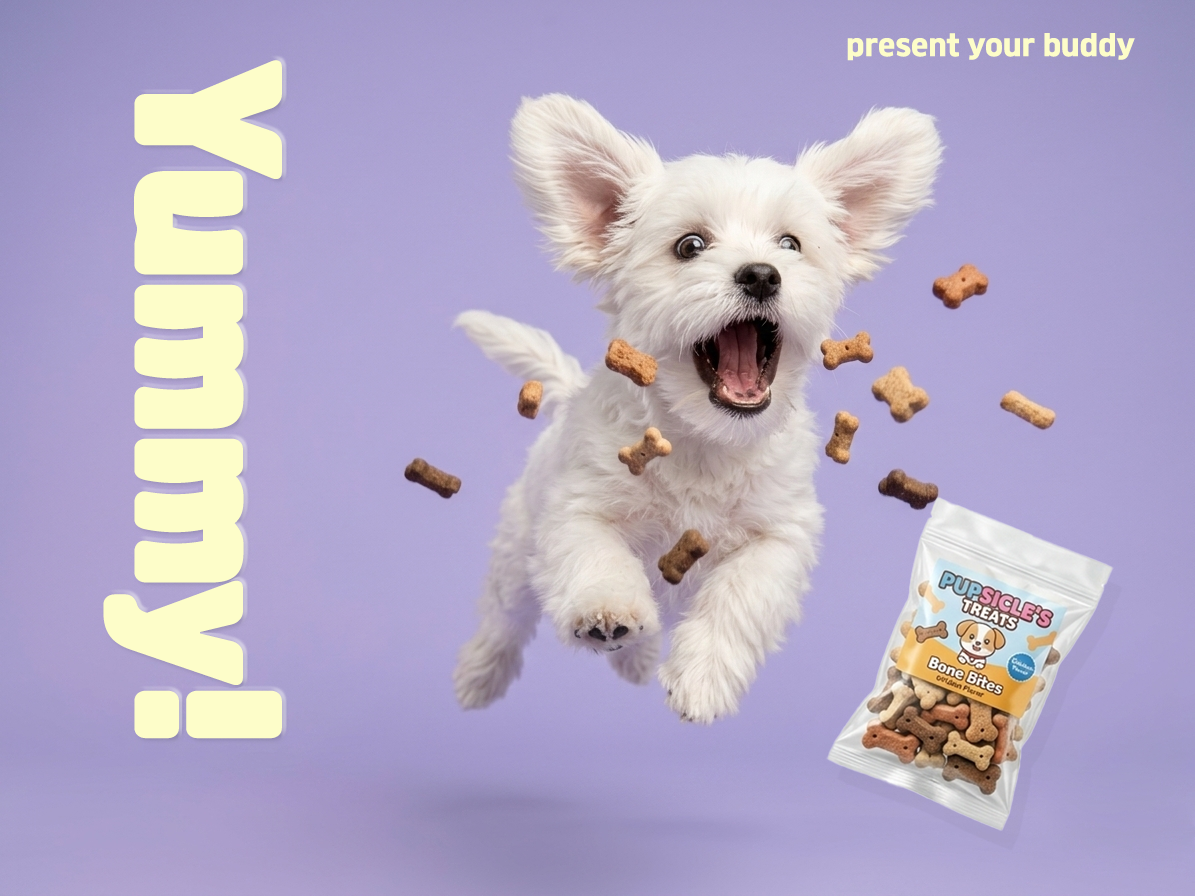
<style>
.page{position:relative;width:1195px;height:896px}
.page>*{position:absolute;margin:0}
.t1{font:27.2px "JalnanGothicTTF";color:#fdfdc9}
.t2{font:165.8px "RixInooAriDuriPR";color:#fdfdc9}
</style>
<div class="page">
<p class="t1" style="left:847px;top:33px;width:288px;height:28px">present your buddy</p>
<p class="t2" style="left:103px;top:60px;width:179px;height:679px;rotate:90deg">Yummy!</p>
</div>
